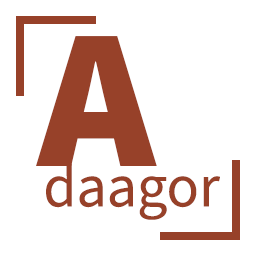
<style>
.page{position:relative;width:256px;height:256px;background:#ffffff}
.page>*{position:absolute;margin:0}
.t1{font:200px "SourceSans3-Black";color:#974129}
.t2{font:60px "SourceSans3-Regular";color:#974129}
</style>
<div class="page">
<p class="t1" style="left:36px;top:36px;width:121px;height:130px">A</p>
<p class="t2" style="left:46px;top:163px;width:174px;height:57px">daagor</p>
</div>
